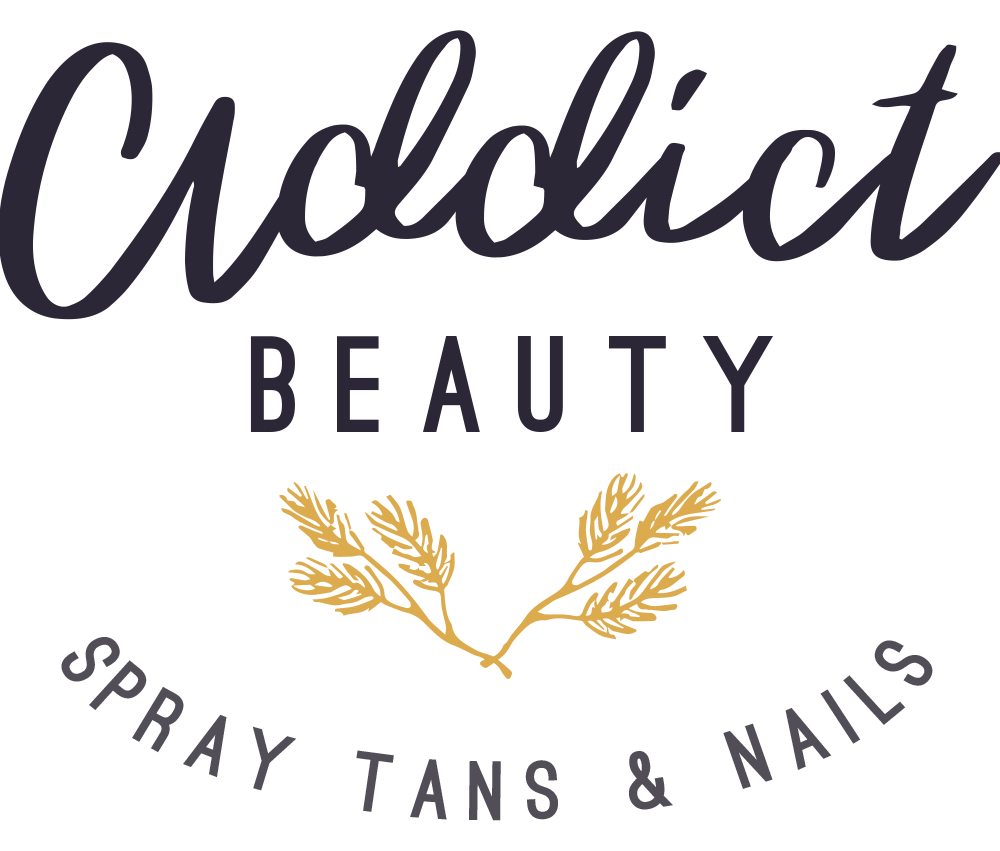
<style>
.page{position:relative;width:1000px;height:851px;background:#ffffff}
.page>*{position:absolute;margin:0}
.t1{font:130.2px "OstrichSans-Black";letter-spacing:0.26em;color:#2c2736;scale:1.05 1}
.t2{font:80px/2124.6px "OstrichSans-Black";letter-spacing:0.24em;color:#514e57;scale:1.1 1}
</style>
<div class="page">
<p class="t1" style="left:250px;top:336px;width:523px;height:96px">BEAUTY</p>
<p class="t2" style="left:61px;top:637px;width:872px;height:184px;text-align:center">SPRAY TANS &amp; NAILS</p>
</div>
